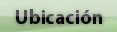
<style>
.page{position:relative;width:117px;height:32px}
.page>*{position:absolute;margin:0}
.t1{font:20px "MyriadPro-Bold";color:#000000}
</style>
<div class="page">
<p class="t1" style="left:16px;top:9px;width:86px;height:15px">Ubicación</p>
</div>
